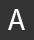
<style>
.page{position:relative;width:34px;height:40px;background:#333333}
.page>*{position:absolute;margin:0}
.t1{font:30px "MyriadPro-Regular";color:#ffffff}
</style>
<div class="page">
<p class="t1" style="left:8px;top:9px;width:17px;height:21px">A</p>
</div>
